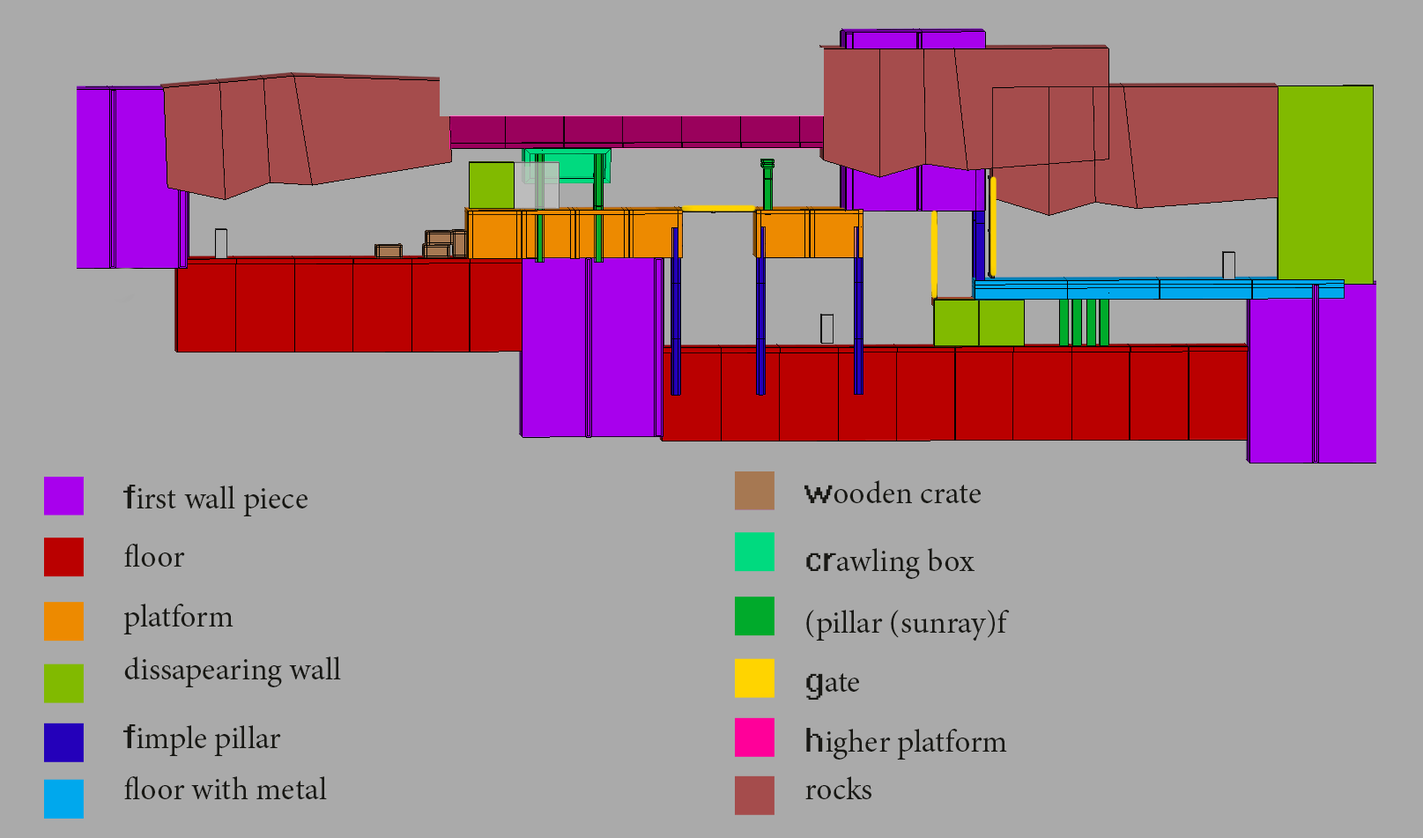
<style>
.page{position:relative;width:1423px;height:838px;background:#aaaaaa}
.page>*{position:absolute;margin:0}
.t1{font:31.7px "MinionPro-Regular";color:#181814}
.t2{font:31.7px "System";color:#181814}
</style>
<div class="page">
<p class="t1" style="left:123px;top:485px;width:185px;height:31px"><span class="t2">f</span>irst wall piece</p>
<p class="t1" style="left:804px;top:480px;width:177px;height:23px"><span class="t2">w</span>ooden crate</p>
<p class="t1" style="left:124px;top:543px;width:61px;height:24px">floor</p>
<p class="t1" style="left:806px;top:548px;width:169px;height:31px"><span class="t2">cr</span>awling box</p>
<p class="t1" style="left:123px;top:604px;width:110px;height:30px">platform</p>
<p class="t1" style="left:806px;top:610px;width:204px;height:31px">pillar (sunray)f)</p>
<p class="t1" style="left:124px;top:656px;width:217px;height:31px">dissapearing wall</p>
<p class="t1" style="left:806px;top:673px;width:53px;height:27px"><span class="t2">g</span>ate</p>
<p class="t1" style="left:123px;top:724px;width:158px;height:32px"><span class="t2">f</span>imple pillar</p>
<p class="t1" style="left:806px;top:728px;width:201px;height:32px"><span class="t2">h</span>igher platform</p>
<p class="t1" style="left:124px;top:775px;width:203px;height:24px">floor with metal</p>
<p class="t1" style="left:805px;top:776px;width:66px;height:23px">rocks</p>
</div>
